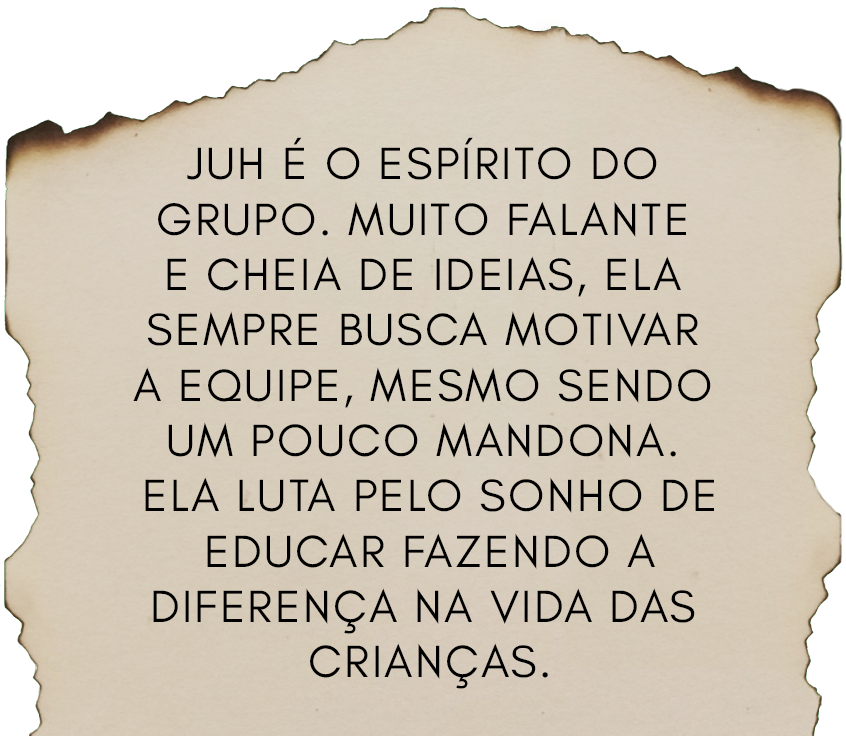
<style>
.page{position:relative;width:846px;height:736px}
.page>*{position:absolute;margin:0}
.t1{font:46.1px "GlacialIndifference-Regular";letter-spacing:0.05em;color:#000000;text-transform:uppercase}
</style>
<div class="page">
<p class="t1" style="left:133px;top:137px;width:581px;height:552px;text-align:center">Juh é o espírito do<br>grupo. muito falante<br>e cheia de ideias, ela<br>sempre busca motivar<br>a equipe, mesmo sendo<br>um pouco mandona.<br> Ela luta pelo sonho de<br> educar fazendo a<br>diferença na vida das<br> crianças.</p>
</div>
